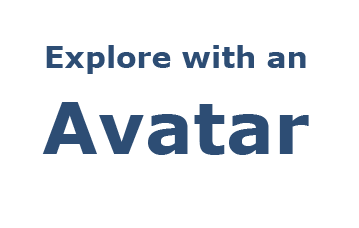
<style>
.page{position:relative;width:359px;height:228px;background:#ffffff}
.page>*{position:absolute;margin:0}
.t1{font:30px "Verdana-Bold";color:#2d4d74}
.t2{font:72px "Verdana-Bold";color:#2d4d74}
</style>
<div class="page">
<p class="t1" style="left:42px;top:45px;width:267px;height:110px;text-align:center">Explore with an<br><span class="t2">Avatar</span></p>
</div>
